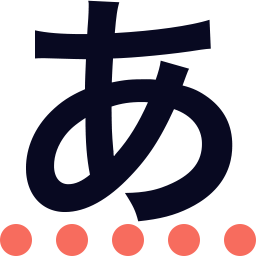
<style>
.page{position:relative;width:256px;height:256px;background:#ffffff}
.page>*{position:absolute;margin:0}
.t1{font:250.8px "HiraKakuProN-W6";color:#080921}
</style>
<div class="page">
<p class="t1" style="left:26px;top:0px;width:207px;height:222px">あ</p>
</div>
